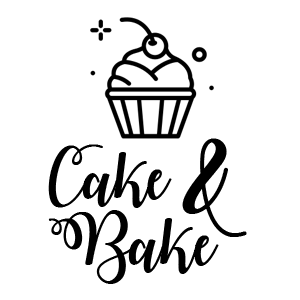
<style>
.page{position:relative;width:300px;height:300px;background:#ffffff}
.page>*{position:absolute;margin:0}
.t1{font:58.3px/66.7px "WatermelonScriptDemo";color:#000000}
.t2{font:100px "WatermelonScriptDemo";color:#000000}
</style>
<div class="page">
<p class="t1" style="left:48px;top:144px;width:171px;height:140px">Cake <br>Bake</p>
<p class="t2" style="left:182px;top:138px;width:65px;height:99px">&amp;</p>
</div>
